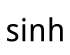
<style>
.page{position:relative;width:70px;height:55px;background:#ffffff}
.page>*{position:absolute;margin:0}
.t1{font:31.8px "DroidSans";color:#000000}
</style>
<div class="page">
<p class="t1" style="left:7px;top:17px;width:56px;height:25px">sinh</p>
</div>
